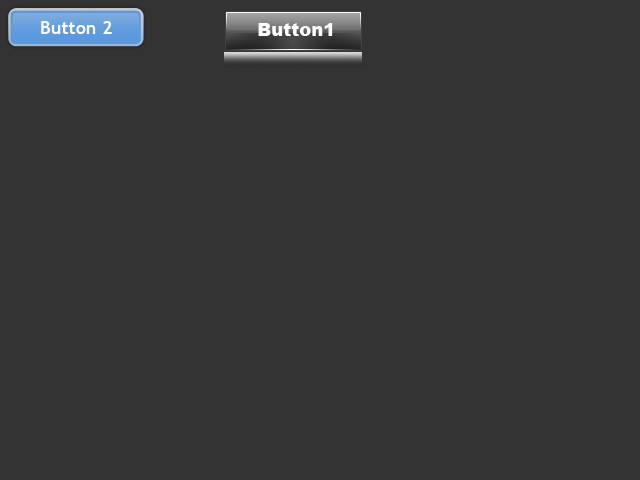
<style>
.page{position:relative;width:640px;height:480px;background:#333333}
.page>*{position:absolute;margin:0}
.t1{font:18px "TrebuchetMS-Bold";color:#ffffff}
.t2{font:18px "Arial-Black";color:#fdfbfb}
</style>
<div class="page">
<p class="t1" style="left:41px;top:21px;width:71px;height:13px">Button 2</p>
<p class="t2" style="left:258px;top:23px;width:75px;height:13px">Button1</p>
</div>
